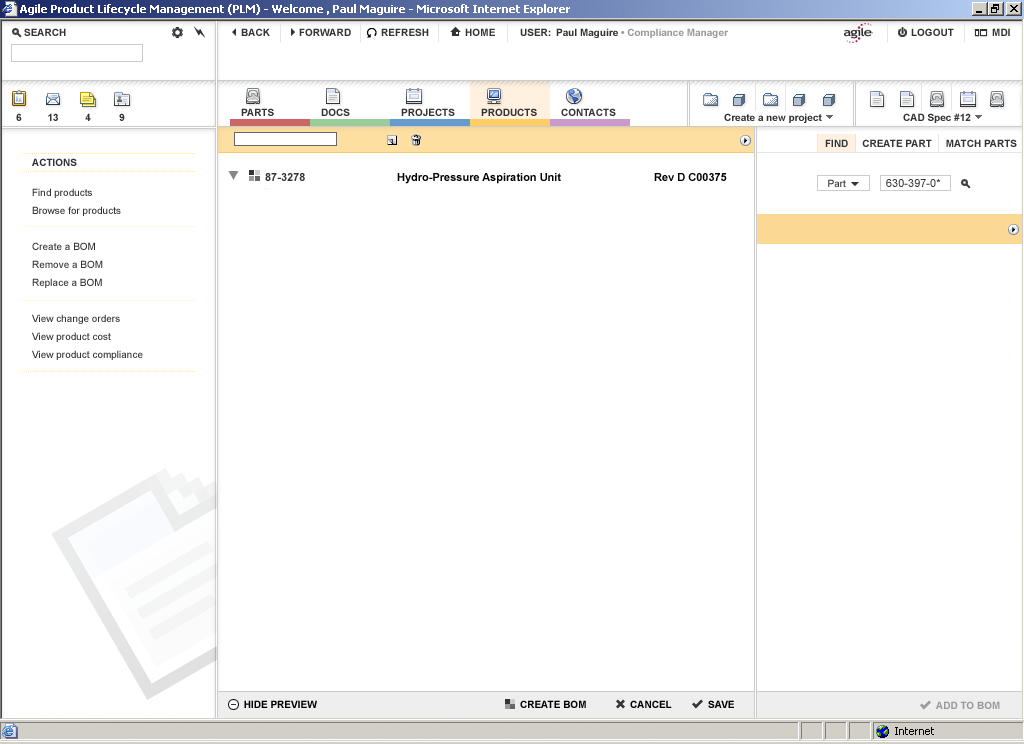
<style>
.page{position:relative;width:1024px;height:744px;background:#ffffff}
.page>*{position:absolute;margin:0}
.t1{font:10px "Arial-BoldMT";color:#333333}
.t2{font:11px "Arial-BoldMT";color:#333333}
.t3{font:11px "Arial-BoldMT";color:#000000}
.t4{font:10px "ArialMT";color:#333333}
.t5{font:11px "ArialMT";color:#333333}
.t6{font:10px/18px "ArialMT";color:#333333}
.t7{font:10px "Arial-BoldMT";color:#000000}
.t8{font:10px "Arial-BoldMT";color:#999999}
</style>
<div class="page">
<p class="t1" style="left:825px;top:139px;width:192px;height:8px">FIND     CREATE PART     MATCH PARTS</p>
<p class="t1" style="left:32px;top:158px;width:45px;height:8px">ACTIONS</p>
<p class="t2" style="left:265px;top:173px;width:40px;height:8px">87-3278</p>
<p class="t3" style="left:397px;top:173px;width:164px;height:11px">Hydro-Pressure Aspiration Unit</p>
<p class="t3" style="left:654px;top:173px;width:73px;height:8px">Rev D C00375</p>
<p class="t4" style="left:828px;top:179px;width:18px;height:8px">Part</p>
<p class="t5" style="left:886px;top:179px;width:55px;height:8px">630-397-0*</p>
<p class="t6" style="left:32px;top:188px;width:111px;height:172px">Find products<br>Browse for products<br><br>Create a BOM<br>Remove a BOM<br>Replace a BOM<br><br>View change orders<br>View product cost<br>View product compliance</p>
<p class="t7" style="left:244px;top:700px;width:73px;height:8px">HIDE PREVIEW</p>
<p class="t7" style="left:520px;top:700px;width:66px;height:8px">CREATE BOM</p>
<p class="t7" style="left:630px;top:700px;width:42px;height:8px">CANCEL</p>
<p class="t7" style="left:708px;top:700px;width:26px;height:8px">SAVE</p>
<p class="t8" style="left:936px;top:701px;width:64px;height:8px">ADD TO BOM</p>
</div>
